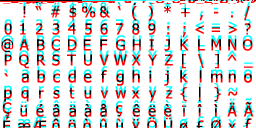
<style>
.page{position:relative;width:256px;height:128px;background:#ffffff}
.page>*{position:absolute;margin:0}
.t1{font:15px/12px "Tahoma";letter-spacing:0.06em}
.t2{font:15px/12px "Tahoma";letter-spacing:0.12em}
.t3{font:14.8px/12px "Tahoma";letter-spacing:0.06em}
.t4{font:15.8px/12px "Tahoma";letter-spacing:0.06em}
.t5{font:15.8px/12px "Tahoma";letter-spacing:0.16em}
.t6{font:14.8px/12px "Tahoma";letter-spacing:0.16em}
.t7{font:14.8px/12px "Tahoma";letter-spacing:0.1em}
</style>
<div class="page">
<p class="t1" style="left:1px;top:0px;width:253px;height:128px"><span class="t2">  ! “ # $ % &amp; ‘ ( ) * + , - . /<br> </span>0 1 2 3 4 5 6 7 8 9 : ; &lt; = &gt; ?<br> @ A B C D E F G H I J K L M N O<br> <span class="t3">P Q R S T U V W X Y Z [ \ ] ^ _<br> </span><span class="t4">` a b c d e f g h i j k l m n o <br> </span><span class="t5">p </span><span class="t6">q r s t u v w x y z { | } ~ <br> </span><span class="t3">Ç ü é â ä à å ç ê ë è ï î ì Ä Ã<br> É æ Æ ô ö ò û ù ÿ Ö Ü ø £ Ø x </span><span class="t7">ƒ</span></p>
</div>
